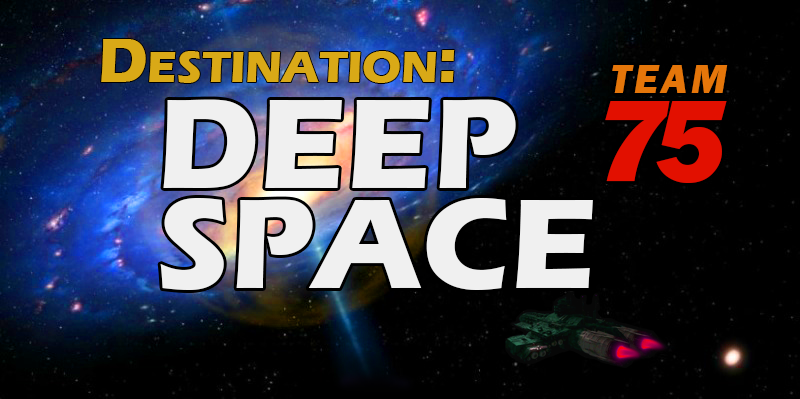
<style>
.page{position:relative;width:800px;height:399px;background:#000000}
.page>*{position:absolute;margin:0}
.t1{font:64px "ErasITC-Bold";color:#d9a917;font-variant:small-caps}
.t2{font:42px "FranklinGothic-HeavyItalic";letter-spacing:0.075em;color:#e5760a;font-variant:small-caps}
.t3{font:132px/100px "ErasITC-Bold";color:#f0f0f0;font-variant:small-caps}
.t4{font:120px "FranklinGothic-HeavyItalic";letter-spacing:-0.1em;color:#e21000;font-variant:small-caps}
</style>
<div class="page">
<p class="t1" style="left:101px;top:39px;width:354px;height:44px">Destination:</p>
<p class="t2" style="left:612px;top:65px;width:116px;height:28px">TEAM</p>
<p class="t3" style="left:160px;top:99px;width:433px;height:191px">DEEP<br>SPACE</p>
<p class="t4" style="left:605px;top:101px;width:122px;height:82px">75</p>
</div>
